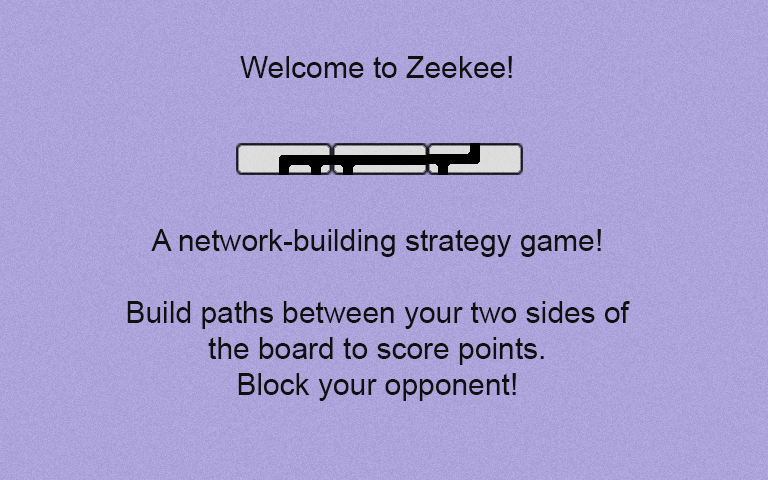
<style>
.page{position:relative;width:768px;height:480px}
.page>*{position:absolute;margin:0}
.t1{font:30px "ArialMT";color:#101010}
</style>
<div class="page">
<p class="t1" style="left:127px;top:56px;width:503px;height:345px;text-align:center">Welcome to Zeekee!<br><br><br><br><br>A network-building strategy game!<br><br>Build paths between your two sides of<br>the board to score points.<br>Block your opponent!</p>
</div>
